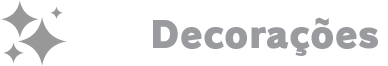
<style>
.page{position:relative;width:388px;height:66px;background:#ffffff}
.page>*{position:absolute;margin:0}
.t1{font:36px "RodinPro-UB";color:#999b9e}
</style>
<div class="page">
<p class="t1" style="left:153px;top:17px;width:225px;height:39px">Decorações</p>
</div>
